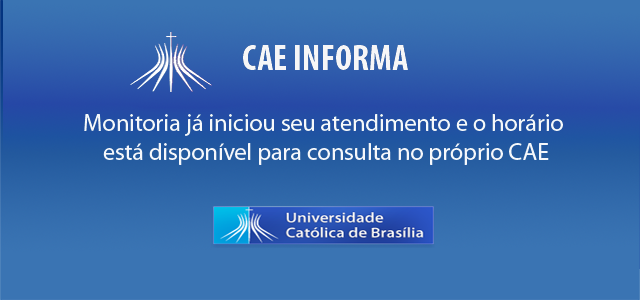
<style>
.page{position:relative;width:640px;height:300px;background:#3a74b3}
.page>*{position:absolute;margin:0}
.t1{font:36px "MyriadPro-BoldCond";color:#f6f6f7}
.t2{font:24px "MyriadPro-Regular";color:#f6f8fb}
</style>
<div class="page">
<p class="t1" style="left:243px;top:45px;width:165px;height:25px">CAE INFORMA</p>
<p class="t2" style="left:84px;top:114px;width:479px;height:51px;text-align:center">Monitoria já iniciou seu atendimento e o horário <br>está disponível para consulta no próprio CAE</p>
</div>
